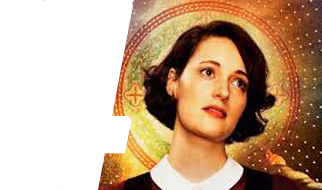
<style>
.page{position:relative;width:322px;height:190px;background:#ffffff}
.page>*{position:absolute;margin:0}
.t1{font:254.7px "Arial-BoldItalicMT";color:#ffffff;font-weight:bold;scale:0.91 1}
</style>
<div class="page">
<p class="t1" style="left:3px;top:1px;width:130px;height:190px">4</p>
</div>
